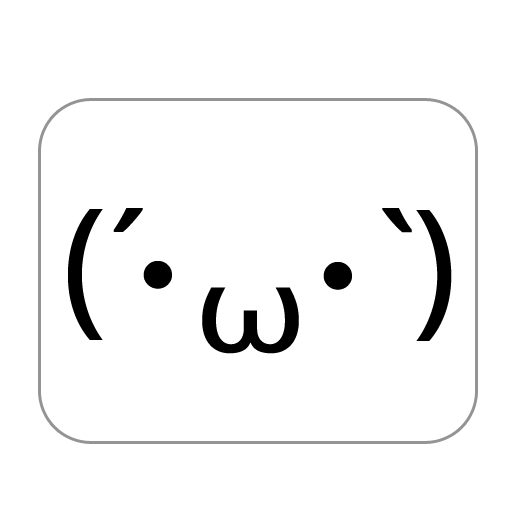
<style>
.page{position:relative;width:512px;height:512px;background:#ffffff}
.page>*{position:absolute;margin:0}
.t1{font:150px "WenQuanYiMicroHei";color:#000000}
.t2{font:120px "WenQuanYiMicroHei";color:#000000;scale:1.25 1}
</style>
<div class="page">
<p class="t1" style="left:68px;top:209px;width:35px;height:131px">(</p>
<p class="t1" style="left:113px;top:208px;width:30px;height:24px">´</p>
<p class="t1" style="left:382px;top:208px;width:30px;height:25px">｀</p>
<p class="t1" style="left:416px;top:210px;width:36px;height:131px">)</p>
<p class="t1" style="left:143px;top:261px;width:29px;height:28px">･</p>
<p class="t1" style="left:323px;top:262px;width:29px;height:28px">･</p>
<p class="t2" style="left:202px;top:287px;width:97px;height:67px">ω</p>
</div>
